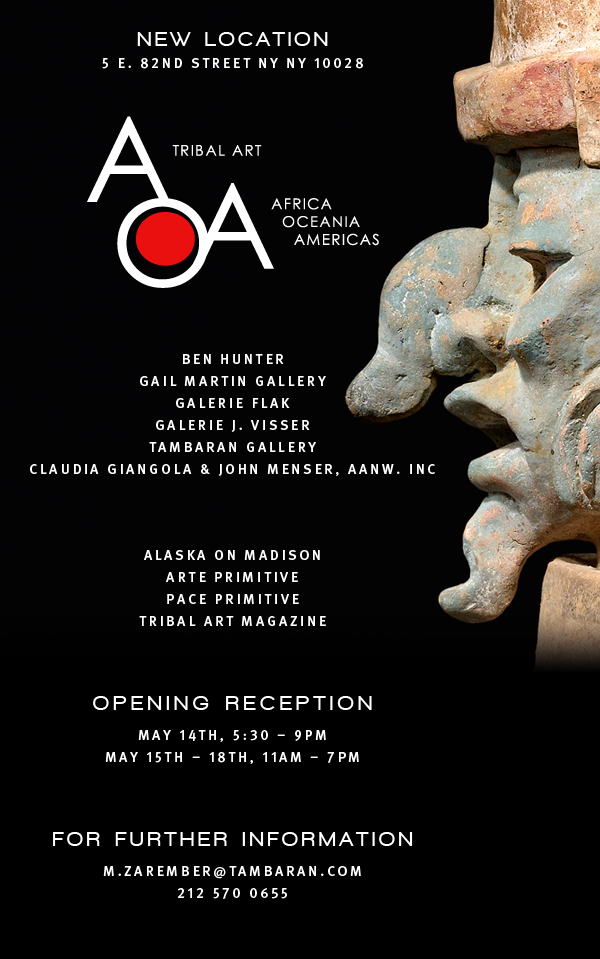
<style>
.page{position:relative;width:600px;height:959px;background:#000000}
.page>*{position:absolute;margin:0}
.t1{font:14px/22px "MetaPro-Medium";letter-spacing:0.2em;color:#ffffff;text-transform:uppercase}
.t2{font:20px/22px "WalkwayBlack";letter-spacing:0.2em;color:#ffffff;text-transform:uppercase}
.t3{font:20px/22px "WalkwaySemiBold";letter-spacing:0.08em;color:#ffffff;text-transform:uppercase}
.t4{font:20px/22px "WalkwayBlack";letter-spacing:0.26em;color:#ffffff;text-transform:uppercase}
.t5{font:14px/8px "MetaPro-Medium";letter-spacing:0.2em;color:#ffffff;text-transform:uppercase}
.t6{font:20px/22px "WalkwayBlack";letter-spacing:0.22em;color:#ffffff;text-transform:uppercase}
</style>
<div class="page">
<p class="t1" style="left:30px;top:32px;width:405px;height:867px;text-align:center"><span class="t2">New Location <br></span>5 E. 82nd Street NY NY 10028<br><span class="t3"><br><br><br><br><br><br><br></span>Ben Hunter<br>Gail Martin Gallery<br>Galerie Flak<br>Galerie J. Visser<br>Tambaran Gallery<br>Claudia Giangola &amp; John Menser, AANW. INC<br><br><br>Alaska on Madison<br>Arte Primitive<br>Pace Primitive<br>Tribal Art Magazine<br><br><span class="t4">Opening Reception<br></span><span class="t5"><br></span>May 14th, 5:30 – 9pm<br>May 15th – 18th, 11am – 7pm<br><br><span class="t6">For further information<br></span><span class="t5"><br></span>m.zarember@tambaran.com<br>212 570 0655</p>
</div>
